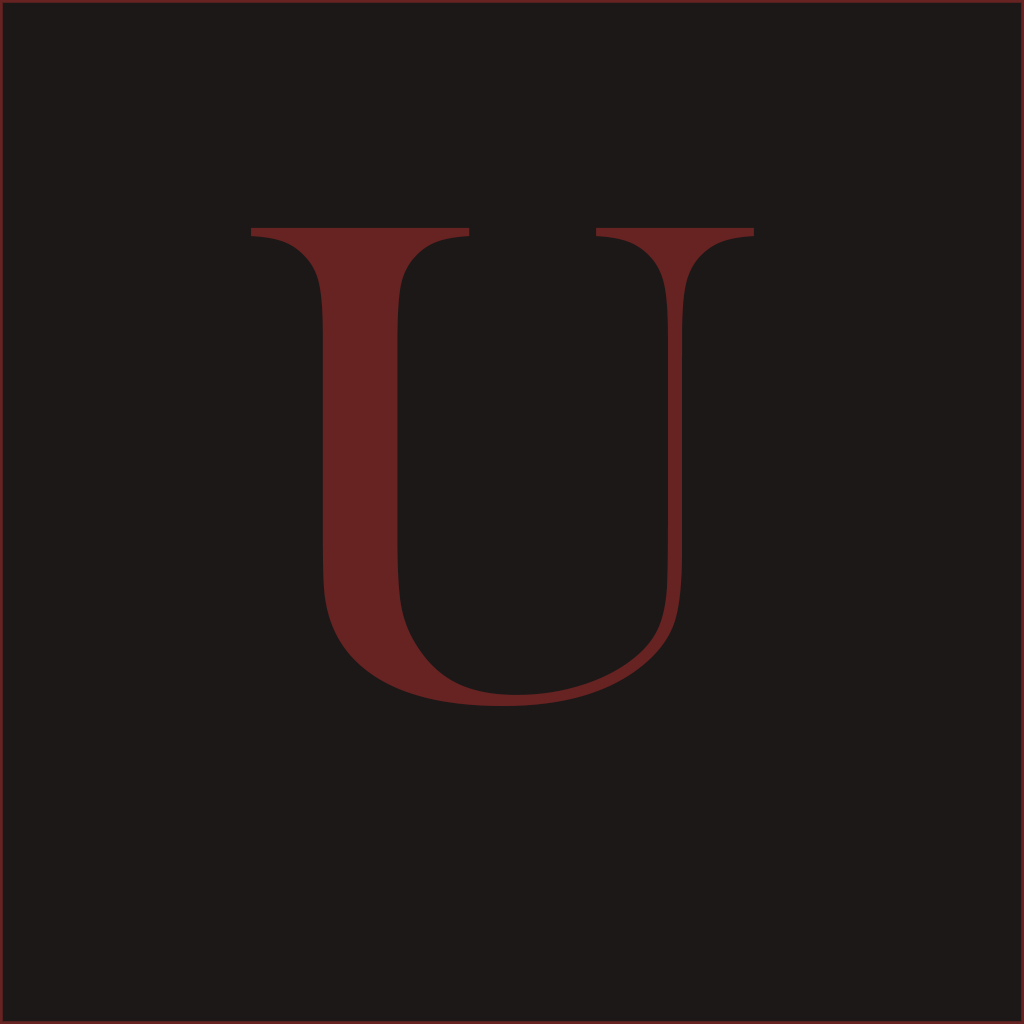
<style>
.page{position:relative;width:1024px;height:1024px;background:#1c1818}
.page>*{position:absolute;margin:0}
.t1{font:700px "BaskOldFace";color:#672222}
</style>
<div class="page">
<p class="t1" style="left:251px;top:227px;width:503px;height:479px">U</p>
</div>
